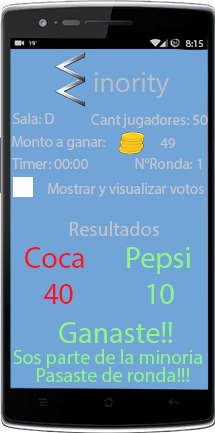
<style>
.page{position:relative;width:215px;height:433px;background:#71a4d7}
.page>*{position:absolute;margin:0}
.t1{font:10px "MyriadPro-Regular";color:#c4c5cb}
.t2{font:15px "MyriadPro-Regular";color:#c4c5cb}
.t3{font:20px "MyriadPro-Regular";color:#c4c5cb}
.t4{font:30px "MyriadPro-Regular";color:#f61525}
.t5{font:30px "MyriadPro-Regular";color:#000000}
.t6{font:30px "MyriadPro-Regular";color:#8ef686}
.t7{font:20px "MyriadPro-Regular";color:#8ef686}
</style>
<div class="page">
<p class="t1" style="left:186px;top:40px;width:17px;height:7px">8:15</p>
<p class="t2" style="left:13px;top:113px;width:41px;height:11px">Sala: D</p>
<p class="t2" style="left:91px;top:114px;width:117px;height:14px">Cant jugadores: 50</p>
<p class="t2" style="left:12px;top:136px;width:93px;height:14px">Monto a ganar:</p>
<p class="t2" style="left:160px;top:138px;width:15px;height:10px">49</p>
<p class="t2" style="left:12px;top:158px;width:76px;height:11px">Timer: 00:00</p>
<p class="t2" style="left:135px;top:158px;width:66px;height:11px">N°Ronda: 1</p>
<p class="t2" style="left:48px;top:183px;width:156px;height:14px">Mostrar y visualizar votos</p>
<p class="t3" style="left:70px;top:221px;width:89px;height:15px">Resultados</p>
<p class="t4" style="left:25px;top:247px;width:59px;height:57px"><span class="t5">  </span>Coca<br>     40</p>
<p class="t6" style="left:127px;top:247px;width:63px;height:57px"><span class="t5">  </span>Pepsi<br>     10</p>
<p class="t6" style="left:59px;top:322px;width:113px;height:21px">Ganaste!!</p>
<p class="t7" style="left:13px;top:349px;width:189px;height:19px">Sos parte de la minoria</p>
<p class="t7" style="left:37px;top:367px;width:152px;height:15px">Pasaste de ronda!!!</p>
</div>
